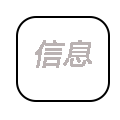
<style>
.page{position:relative;width:120px;height:120px;background:#ffffff}
.page>*{position:absolute;margin:0}
.t1{font:28px "MicrosoftYaHei";color:#bab2b2;font-weight:bold;font-style:italic}
</style>
<div class="page">
<p class="t1" style="left:35px;top:40px;width:57px;height:28px">信息</p>
</div>
